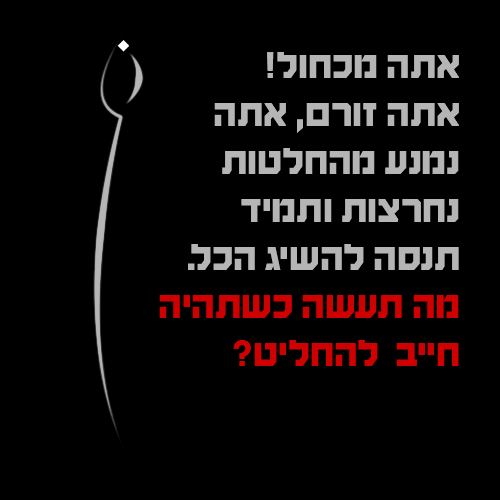
<style>
.page{position:relative;width:500px;height:500px;background:#000000}
.page>*{position:absolute;margin:0}
.t1{font:40px "HaimG-Regular";color:#b5b5b5}
.t2{font:40px "HaimG-Regular";color:#ce0000}
</style>
<div class="page">
<p class="t1" style="left:159px;top:52px;width:300px;height:314px">אתה מכחול!<br>אתה זורם, אתה נמנע מהחלטות נחרצות ותמיד    תנסה להשיג הכל.                       <span class="t2">מה תעשה כשתהיה חייב  להחליט?</span></p>
</div>
